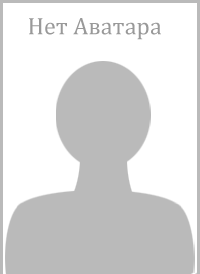
<style>
.page{position:relative;width:200px;height:274px;background:#ffffff}
.page>*{position:absolute;margin:0}
.t1{font:24px "Cambria";color:#999999}
</style>
<div class="page">
<p class="t1" style="left:29px;top:18px;width:132px;height:22px">Нет Аватара</p>
</div>
